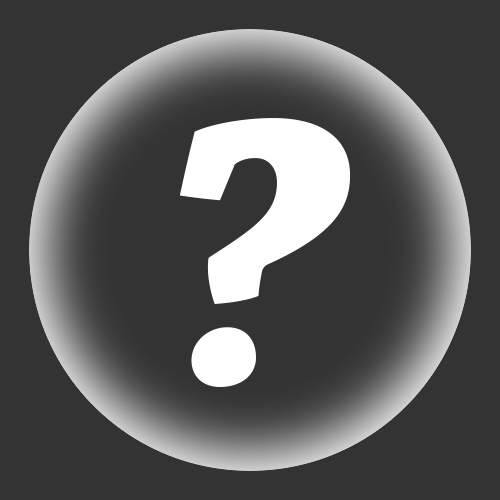
<style>
.page{position:relative;width:500px;height:500px;background:#333333}
.page>*{position:absolute;margin:0}
.t1{font:401px "ChaparralPro-BoldIt";color:#ffffff}
</style>
<div class="page">
<p class="t1" style="left:179px;top:118px;width:172px;height:269px">?</p>
</div>
